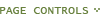
<style>
.page{position:relative;width:100px;height:20px;background:#ffffff}
.page>*{position:absolute;margin:0}
.t1{font:10.7px "LucidaConsole";letter-spacing:0.025em;color:#68813e}
</style>
<div class="page">
<p class="t1" style="left:0px;top:7px;width:89px;height:7px">PAGE CONTROLS</p>
</div>
